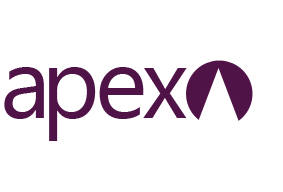
<style>
.page{position:relative;width:283px;height:192px;background:#ffffff}
.page>*{position:absolute;margin:0}
.t1{font:100px "SegoeUI";letter-spacing:-0.05em;color:#501347}
.t2{font:100px "SegoeUI";letter-spacing:-0.1em;color:#501347}
</style>
<div class="page">
<p class="t1" style="left:4px;top:67px;width:183px;height:74px"><span class="t2">a</span>pex</p>
</div>
